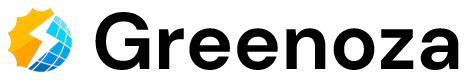
<style>
.page{position:relative;width:467px;height:80px;background:#ffffff}
.page>*{position:absolute;margin:0}
.t1{font:80px "DMSans-Bold";color:#000000}
</style>
<div class="page">
<p class="t1" style="left:95px;top:12px;width:364px;height:58px">Greenoza</p>
</div>
